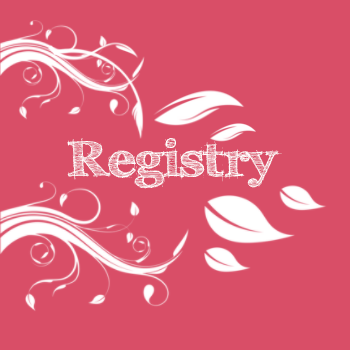
<style>
.page{position:relative;width:350px;height:350px;background:#d94e67}
.page>*{position:absolute;margin:0}
.t1{font:50px "FFFTusj-Bold";color:#ffffff}
</style>
<div class="page">
<p class="t1" style="left:67px;top:138px;width:215px;height:51px">Registry</p>
</div>
